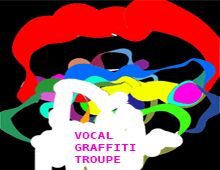
<style>
.page{position:relative;width:220px;height:170px;background:#000000}
.page>*{position:absolute;margin:0}
.t1{font:10px "DejaVuSansMono-Bold";color:#ff00d2;scale:1.29 1}
</style>
<div class="page">
<p class="t1" style="left:74px;top:132px;width:62px;height:31px">VOCAL<br>GRAFFITI<br>TROUPE</p>
</div>
